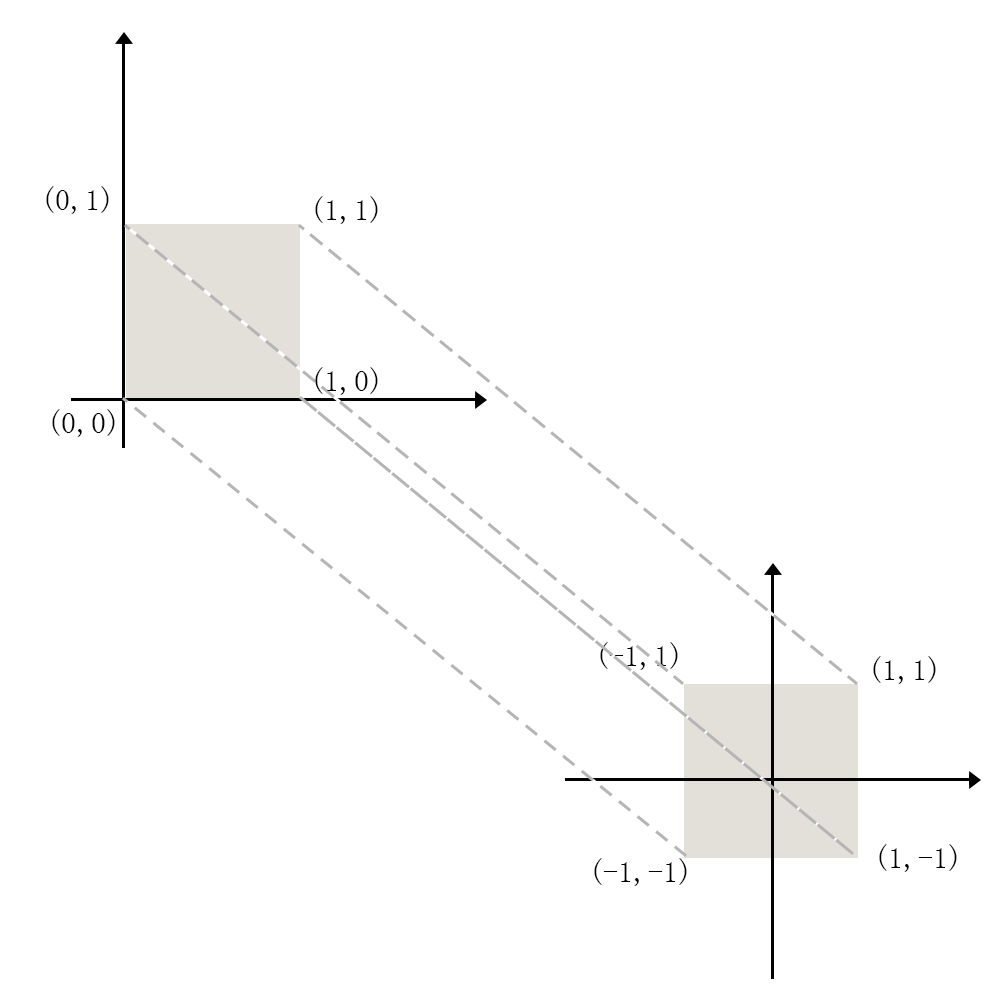
<style>
.page{position:relative;width:1000px;height:1000px;background:#ffffff}
.page>*{position:absolute;margin:0}
.t1{font:30px "SimSun";color:#000000}
</style>
<div class="page">
<p class="t1" style="left:46px;top:186px;width:63px;height:28px">(0,1)</p>
<p class="t1" style="left:315px;top:196px;width:63px;height:28px">(1,1)</p>
<p class="t1" style="left:315px;top:367px;width:63px;height:28px">(1,0)</p>
<p class="t1" style="left:52px;top:409px;width:63px;height:28px">(0,0)</p>
<p class="t1" style="left:600px;top:642px;width:78px;height:28px">(-1,1)</p>
<p class="t1" style="left:873px;top:656px;width:63px;height:28px">(1,1)</p>
<p class="t1" style="left:879px;top:844px;width:78px;height:28px">(1,-1)</p>
<p class="t1" style="left:594px;top:858px;width:93px;height:28px">(-1,-1)</p>
</div>
